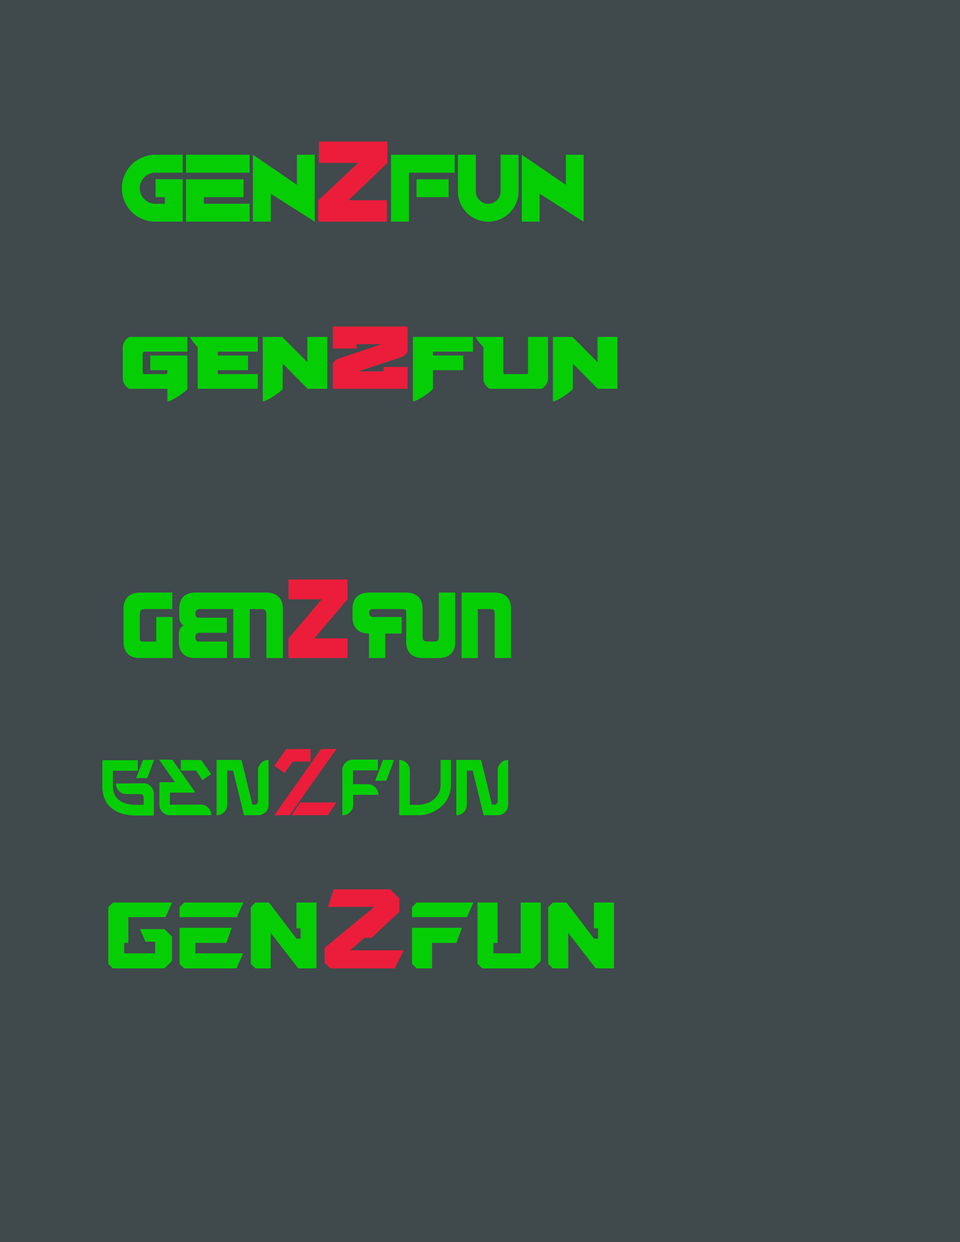
<style>
.page{position:relative;width:960px;height:1242px;background:#40494c}
.page>*{position:absolute;margin:0}
.t1{font:94.1px "CounterStreamDemoRegular";color:#05ce05}
.t2{font:112.9px "CounterStreamDemoRegular";color:#ec1d3a}
.t3{font:94.1px "BomberEscort";color:#05ce05}
.t4{font:112.9px "BomberEscort";color:#ec1d3a}
.t5{font:94.1px "DendriticVoltage-Regular";color:#05ce05}
.t6{font:112.9px "DendriticVoltage-Regular";color:#ec1d3a}
.t7{font:94.1px "Galaksinos";color:#05ce05}
.t8{font:112.9px "Galaksinos";color:#ec1d3a}
.t9{font:94.1px "Mechanismo-Regular";color:#05ce05}
.t10{font:112.9px "Mechanismo-Regular";color:#ec1d3a}
</style>
<div class="page">
<p class="t1" style="left:122px;top:142px;width:462px;height:80px">GEN<span class="t2">Z</span>FUN</p>
<p class="t3" style="left:123px;top:326px;width:494px;height:76px">GEN<span class="t4">Z</span>FUN</p>
<p class="t5" style="left:123px;top:579px;width:388px;height:79px">GEN<span class="t6">Z</span>FUN</p>
<p class="t7" style="left:102px;top:749px;width:406px;height:67px">GEN<span class="t8">Z</span>FUN</p>
<p class="t9" style="left:108px;top:890px;width:506px;height:79px">GEN<span class="t10">Z</span>FUN</p>
</div>
